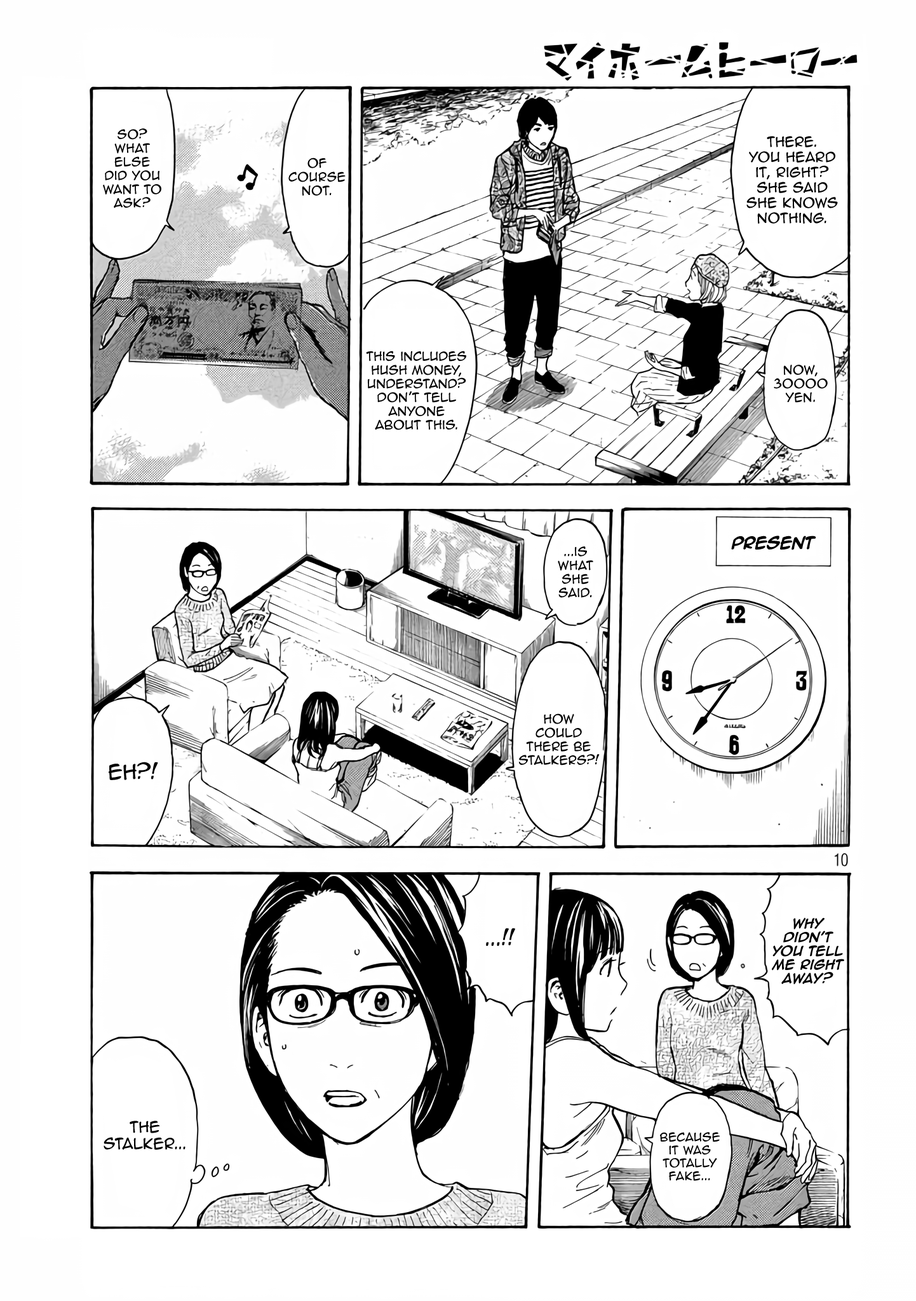
<style>
.page{position:relative;width:916px;height:1301px;background:#ffffff}
.page>*{position:absolute;margin:0}
.t1{font:11.4px "AnimeAce2.0BB";color:#000000}
.t2{font:12.7px "AnimeAce2.0BB";color:#000000}
.t3{font:14px "AnimeAce2.0BB-Bold";color:#000000}
.t4{font:19.1px "AnimeAce2.0BB";color:#000000}
.t5{font:11.4px "AnimeAce2.0BB-Bold";color:#000000}
.t6{font:14px "AnimeAce2.0BB";color:#000000}
.t7{font:10.8px "AnimeAce2.0BB";color:#000000}
</style>
<div class="page">
<p class="t1" style="left:103px;top:128px;width:58px;height:80px;text-align:center">So? What else did you want to ask?</p>
<p class="t2" style="left:747px;top:136px;width:91px;height:88px;text-align:center">There.<br>you heard it, right? She said she knows nothing.</p>
<p class="t1" style="left:288px;top:158px;width:58px;height:38px;text-align:center">Of course not.</p>
<p class="t1" style="left:366px;top:351px;width:100px;height:79px;text-align:center">This includes<br>hush money,<br>understand?Don’t tell anyone about this.</p>
<p class="t1" style="left:774px;top:365px;width:54px;height:38px;text-align:center">Now, 30000 yen.</p>
<p class="t3" style="left:731px;top:536px;width:86px;height:14px">Present</p>
<p class="t1" style="left:558px;top:546px;width:35px;height:52px;text-align:center">...is what she said.</p>
<p class="t1" style="left:519px;top:714px;width:81px;height:52px;text-align:center">How<br>could there be stalkers?!</p>
<p class="t4" style="left:109px;top:762px;width:49px;height:18px">Eh?!</p>
<p class="t5" style="left:772px;top:918px;width:72px;height:67px;text-align:center">Why didn’t you tell me right away?</p>
<p class="t4" style="left:486px;top:928px;width:29px;height:18px">...!!</p>
<p class="t6" style="left:104px;top:1121px;width:82px;height:29px;text-align:center">The stalker...</p>
<p class="t7" style="left:660px;top:1132px;width:61px;height:49px;text-align:center">Because it was Totally fake...</p>
</div>
